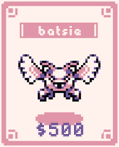
<style>
.page{position:relative;width:119px;height:147px;background:#fff1eb}
.page>*{position:absolute;margin:0}
.t1{font:24px "HeartbitXX2Px";font-weight:bold;scale:0.91 1}
.t2{font:24px "HeartbitXX2Px";color:#fff1eb;font-weight:bold;scale:0.91 1}
.t3{font:30px "HeartbitXX2Px";color:#70579c;font-weight:bold;scale:0.9 1}
</style>
<div class="page">
<p class="t1" style="left:38px;top:25px;width:43px;height:11px">slimie</p>
<p class="t2" style="left:38px;top:25px;width:43px;height:11px">batsie</p>
<p class="t3" style="left:36px;top:123px;width:48px;height:15px">$200</p>
<p class="t3" style="left:36px;top:122px;width:48px;height:15px">$500</p>
</div>
